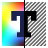
<style>
.page{position:relative;width:48px;height:48px;background:#ffffff}
.page>*{position:absolute;margin:0}
.t1{font:37.5px "ChunkFive-Roman"}
</style>
<div class="page">
<p class="t1" style="left:11px;top:11px;width:26px;height:27px">T</p>
<p class="t1" style="left:11px;top:11px;width:26px;height:27px">T</p>
</div>
